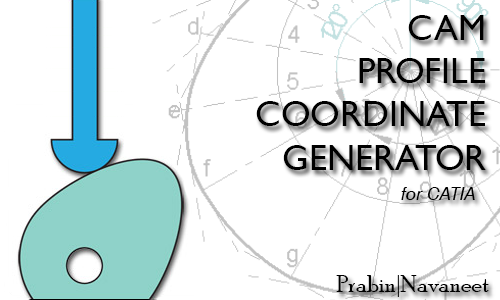
<style>
.page{position:relative;width:500px;height:300px;background:#ffffff}
.page>*{position:absolute;margin:0}
.t1{font:36px "GillSansMT";color:#000000}
.t2{font:18px "Swiss721BT-Italic";color:#000000}
.t3{font:24px "PoorRichard-Regular";color:#000000}
</style>
<div class="page">
<p class="t1" style="left:256px;top:15px;width:230px;height:155px">CAM<br>PROFILE<br>COORDINATE<br>GENERATOR</p>
<p class="t2" style="left:401px;top:187px;width:74px;height:13px">for CATIA</p>
<p class="t3" style="left:336px;top:275px;width:153px;height:22px">Prabin|Navaneet</p>
</div>
